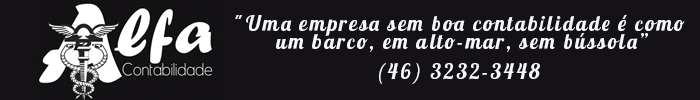
<style>
.page{position:relative;width:700px;height:100px;background:#141214}
.page>*{position:absolute;margin:0}
.t1{font:21px/18px "Lobster1.4";letter-spacing:0.1em;color:#f8f8fb}
.t2{font:21px "Lobster1.4";letter-spacing:0.1em;color:#f8f8fb}
</style>
<div class="page">
<p class="t1" style="left:235px;top:15px;width:450px;height:37px;text-align:center">"Uma empresa sem boa contabilidade é como <br>um barco, em alto-mar, sem bússola”</p>
<p class="t2" style="left:379px;top:63px;width:161px;height:21px">(46) 3232-3448</p>
</div>
